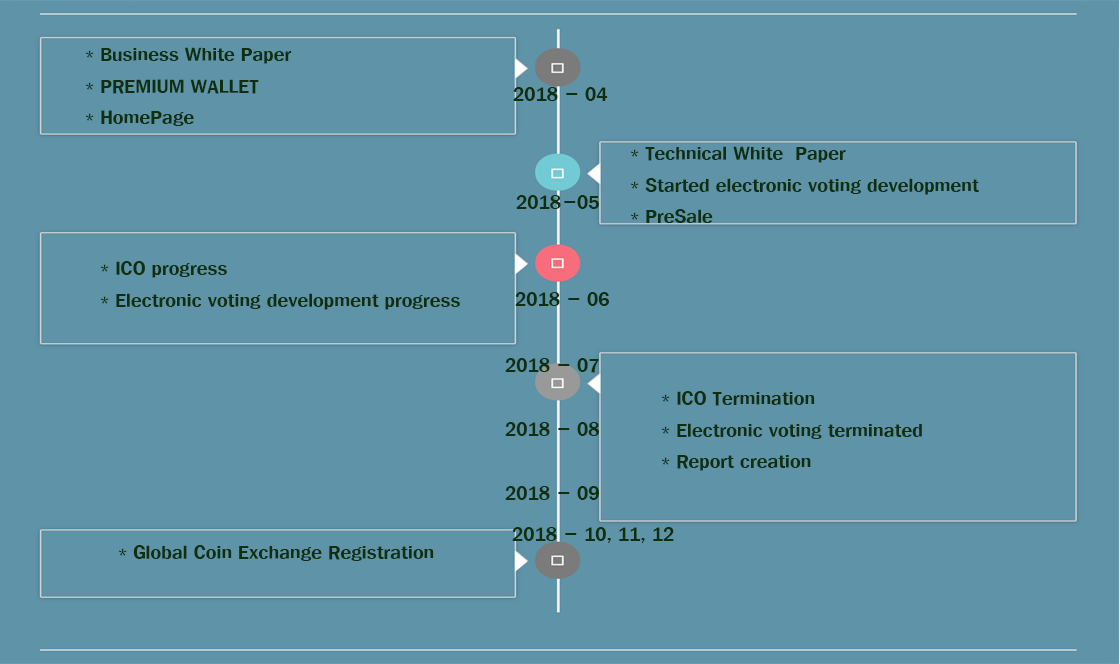
<style>
.page{position:relative;width:1120px;height:664px;background:#5f93a8}
.page>*{position:absolute;margin:0}
.t1{font:18px "HYsupB";color:#0f2f0e}
</style>
<div class="page">
<p class="t1" style="left:85px;top:47px;width:207px;height:79px">* Business White Paper<br>* PREMIUM WALLET<br>* HomePage</p>
<p class="t1" style="left:513px;top:87px;width:95px;height:14px">2018 - 04</p>
<p class="t1" style="left:630px;top:146px;width:349px;height:77px">* Technical White  Paper<br>* Started electronic voting development<br>* PreSale</p>
<p class="t1" style="left:516px;top:195px;width:45px;height:14px">2018</p>
<p class="t1" style="left:564px;top:195px;width:35px;height:14px">-05</p>
<p class="t1" style="left:100px;top:261px;width:360px;height:49px">* ICO progress<br>* Electronic voting development progress</p>
<p class="t1" style="left:515px;top:292px;width:94px;height:14px">2018 - 06</p>
<p class="t1" style="left:505px;top:358px;width:94px;height:15px">2018 - 07</p>
<p class="t1" style="left:661px;top:391px;width:261px;height:80px">* ICO Termination<br>* Electronic voting terminated<br>* Report creation</p>
<p class="t1" style="left:505px;top:422px;width:94px;height:14px">2018 - 08</p>
<p class="t1" style="left:505px;top:486px;width:94px;height:14px">2018 - 09</p>
<p class="t1" style="left:512px;top:527px;width:162px;height:16px">2018 - 10, 11, 12</p>
<p class="t1" style="left:118px;top:545px;width:316px;height:16px">* Global Coin Exchange Registration</p>
</div>
